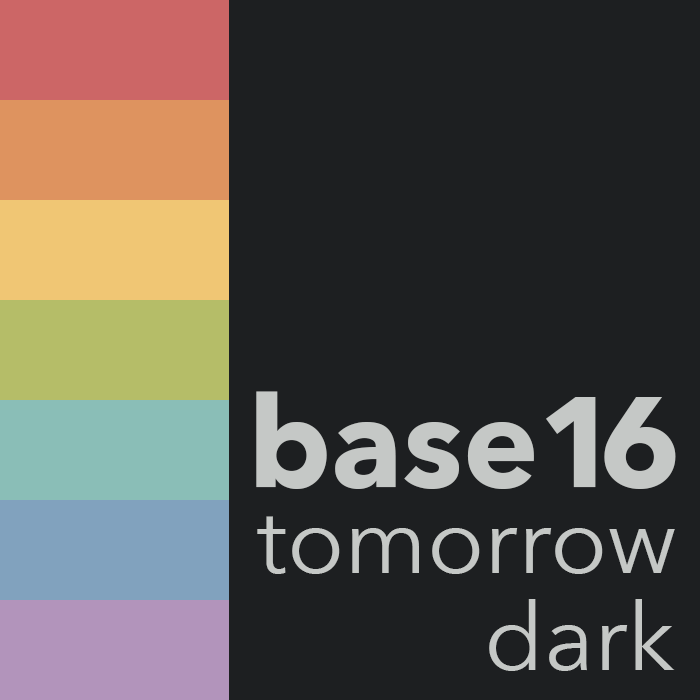
<style>
.page{position:relative;width:700px;height:700px;background:#1d1f21}
.page>*{position:absolute;margin:0}
.t1{font:127px "AvenirNext-Bold";color:#c5c8c6}
.t2{font:93.9px "AvenirNext-Regular";color:#c5c8c6}
</style>
<div class="page">
<p class="t1" style="left:256px;top:391px;width:340px;height:98px">base1</p>
<p class="t1" style="left:604px;top:397px;width:72px;height:92px">6</p>
<p class="t2" style="left:257px;top:516px;width:418px;height:58px">tomorrow</p>
<p class="t2" style="left:489px;top:599px;width:186px;height:72px">dark</p>
</div>
